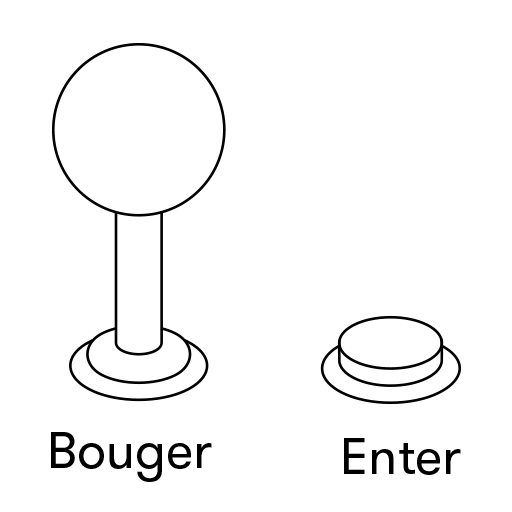
<style>
.page{position:relative;width:512px;height:512px;background:#ffffff}
.page>*{position:absolute;margin:0}
.t1{font:51.8px "GTWalsheimRegular";color:#000000}
</style>
<div class="page">
<p class="t1" style="left:51px;top:432px;width:161px;height:50px">Bouger</p>
<p class="t1" style="left:344px;top:438px;width:117px;height:37px">Enter</p>
</div>
